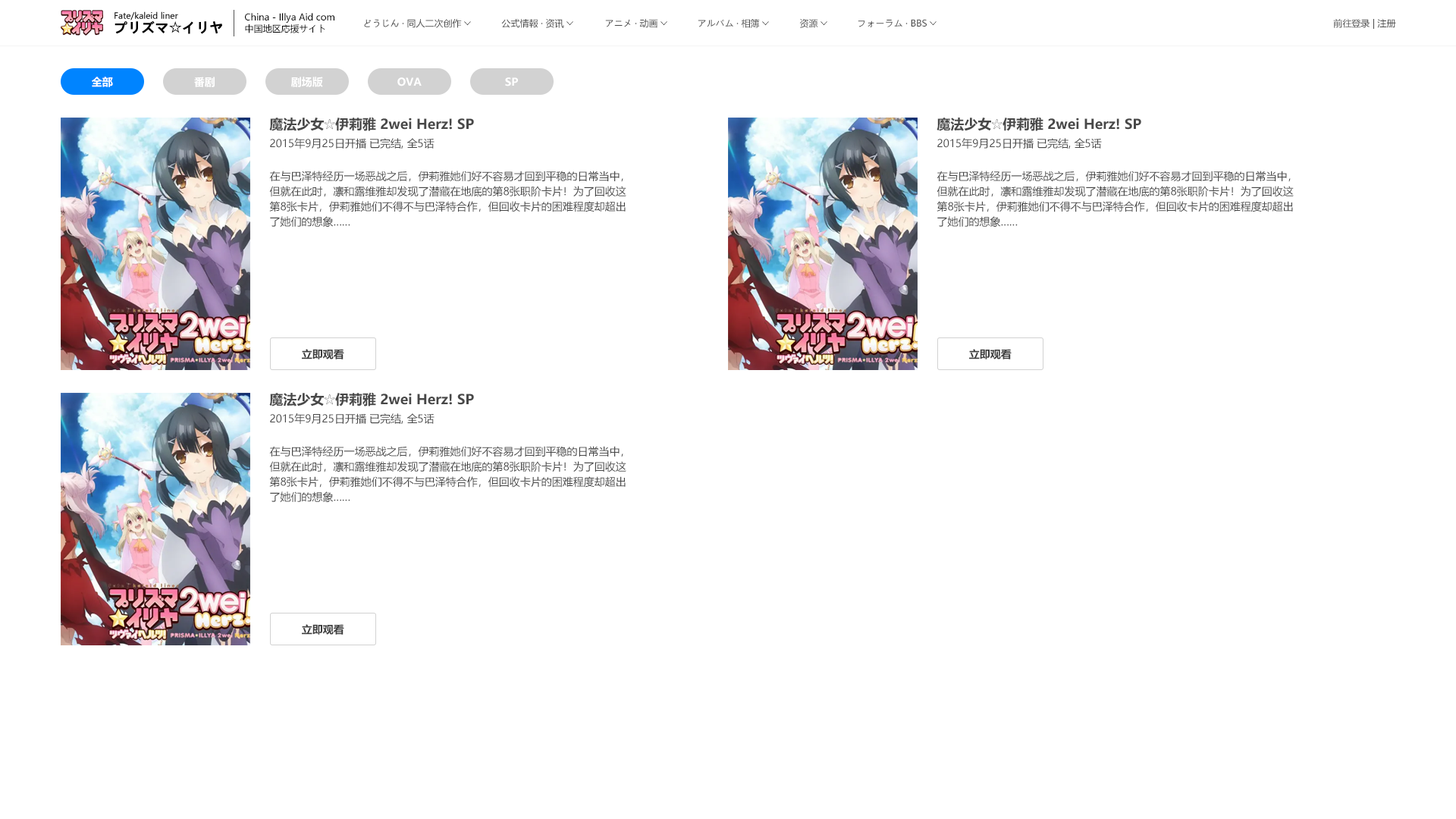
<style>
.page{position:relative;width:1456px;height:819px;background:#ffffff}
.page>*{position:absolute;margin:0}
.t1{font:8.3px "MicrosoftYaHeiUI";color:#000000}
.t2{font:9.1px "MicrosoftYaHeiUI";color:#000000}
.t3{font:13.6px "MicrosoftYaHeiUI-Bold";color:#000000}
.t4{font:13.6px "AdobeHeitiStd-Regular";color:#000000}
.t5{font:9.1px "MicrosoftYaHeiUI";color:#484848}
.t6{font:9.1px "MS-PGothic"}
.t7{font:10.6px "MicrosoftYaHeiUI-Bold";color:#ffffff}
.t8{font:13.6px "MicrosoftYaHeiUI-Bold";color:#484848}
.t9{font:10.6px "MicrosoftYaHeiUI";color:#484848}
.t10{font:10.6px/15.2px "MicrosoftYaHeiUI";color:#484848}
.t11{font:10.6px "MicrosoftYaHeiUI-Bold";color:#3d3d3d}
</style>
<div class="page">
<p class="t1" style="left:115px;top:11px;width:63px;height:9px">Fate/kaleid liner</p>
<p class="t2" style="left:245px;top:13px;width:89px;height:10px">China - Illya Aid com</p>
<p class="t3" style="left:115px;top:20px;width:107px;height:14px">プリズマ<span class="t4">☆</span>イリヤ</p>
<p class="t2" style="left:245px;top:24px;width:80px;height:9px">中国地区応援サイト</p>
<p class="t5" style="left:364px;top:19px;width:98px;height:9px">どうじん · 同人二次创作</p>
<p class="t6" style="left:464px;top:21px;width:7px;height:5px;rotate:90deg">&gt;</p>
<p class="t5" style="left:501px;top:18px;width:63px;height:10px">公式情報 · 资讯</p>
<p class="t6" style="left:566px;top:21px;width:7px;height:5px;rotate:90deg">&gt;</p>
<p class="t5" style="left:605px;top:19px;width:53px;height:9px">アニメ · 动画</p>
<p class="t6" style="left:660px;top:21px;width:7px;height:5px;rotate:90deg">&gt;</p>
<p class="t5" style="left:698px;top:19px;width:62px;height:9px">アルバム · 相簿</p>
<p class="t6" style="left:762px;top:21px;width:7px;height:5px;rotate:90deg">&gt;</p>
<p class="t5" style="left:799px;top:18px;width:19px;height:10px">资源</p>
<p class="t6" style="left:821px;top:21px;width:6px;height:5px;rotate:90deg">&gt;</p>
<p class="t5" style="left:858px;top:19px;width:69px;height:8px">フォーラム · BBS</p>
<p class="t6" style="left:930px;top:21px;width:7px;height:5px;rotate:90deg">&gt;</p>
<p class="t5" style="left:1333px;top:19px;width:63px;height:10px">前往登录 | 注册</p>
<p class="t7" style="left:92px;top:77px;width:21px;height:10px">全部</p>
<p class="t7" style="left:194px;top:77px;width:21px;height:10px">番剧</p>
<p class="t7" style="left:291px;top:77px;width:32px;height:10px">剧场版</p>
<p class="t7" style="left:397px;top:77px;width:25px;height:9px">OVA</p>
<p class="t7" style="left:505px;top:77px;width:13px;height:9px">SP</p>
<p class="t8" style="left:269px;top:117px;width:205px;height:14px">魔法少女☆伊莉雅 2wei Herz! SP</p>
<p class="t8" style="left:937px;top:117px;width:204px;height:14px">魔法少女☆伊莉雅 2wei Herz! SP</p>
<p class="t9" style="left:270px;top:138px;width:165px;height:11px">2015年9月25日开播 已完结, 全5话</p>
<p class="t9" style="left:937px;top:138px;width:165px;height:11px">2015年9月25日开播 已完结, 全5话</p>
<p class="t10" style="left:269px;top:171px;width:357px;height:56px">在与巴泽特经历一场恶战之后，伊莉雅她们好不容易才回到平稳的日常当中，但就在此时，凛和露维雅却发现了潜藏在地底的第8张职阶卡片！为了回收这第8张卡片，伊莉雅她们不得不与巴泽特合作，但回收卡片的困难程度却超出了她们的想象……</p>
<p class="t10" style="left:937px;top:171px;width:357px;height:56px">在与巴泽特经历一场恶战之后，伊莉雅她们好不容易才回到平稳的日常当中，但就在此时，凛和露维雅却发现了潜藏在地底的第8张职阶卡片！为了回收这第8张卡片，伊莉雅她们不得不与巴泽特合作，但回收卡片的困难程度却超出了她们的想象……</p>
<p class="t11" style="left:302px;top:349px;width:42px;height:10px">立即观看</p>
<p class="t11" style="left:969px;top:349px;width:43px;height:10px">立即观看</p>
<p class="t8" style="left:269px;top:392px;width:205px;height:14px">魔法少女☆伊莉雅 2wei Herz! SP</p>
<p class="t9" style="left:270px;top:413px;width:165px;height:11px">2015年9月25日开播 已完结, 全5话</p>
<p class="t10" style="left:269px;top:446px;width:357px;height:57px">在与巴泽特经历一场恶战之后，伊莉雅她们好不容易才回到平稳的日常当中，但就在此时，凛和露维雅却发现了潜藏在地底的第8张职阶卡片！为了回收这第8张卡片，伊莉雅她们不得不与巴泽特合作，但回收卡片的困难程度却超出了她们的想象……</p>
<p class="t11" style="left:302px;top:624px;width:42px;height:11px">立即观看</p>
</div>
